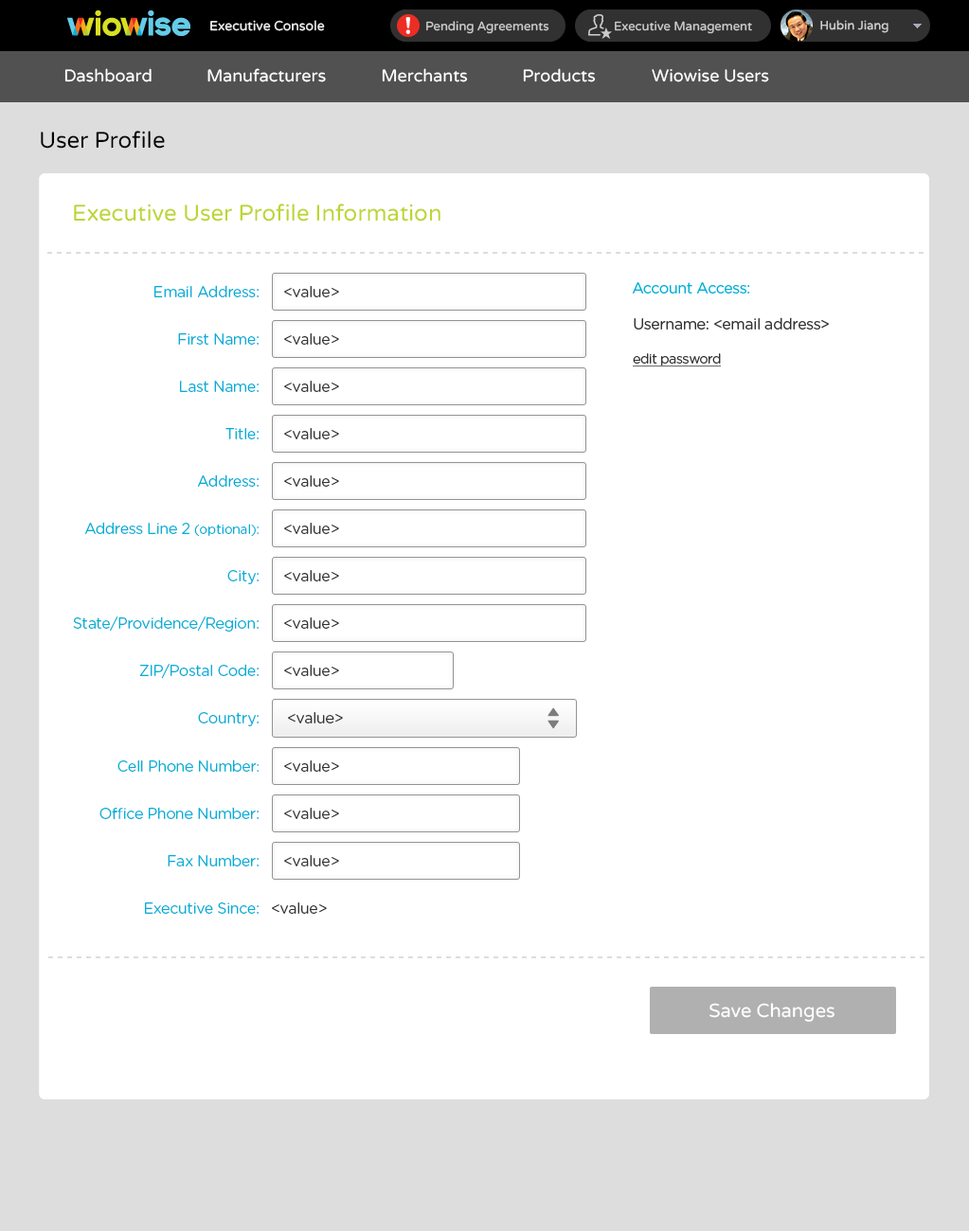
<style>
.page{position:relative;width:969px;height:1231px;background:#ffffff}
.page>*{position:absolute;margin:0}
.t1{font:13.3px "VarelaRound-Regular";color:#eeeeee}
.t2{font:12.3px "VarelaRound-Regular";color:#cccccc}
.t3{font:17px "VarelaRound-Regular";color:#ffffff}
.t4{font:22.7px "VarelaRound-Regular";color:#000000}
.t5{font:22.7px "VarelaRound-Regular";color:#bcd631}
.t6{font:15.2px "GothamRounded-Book";letter-spacing:-0.025em;color:#00afd8}
.t7{font:15.2px "GothamRounded-Book";letter-spacing:-0.025em;color:#333333}
.t8{font:13.3px "GothamRounded-Book";letter-spacing:-0.025em;color:#333333;text-decoration:underline}
.t9{font:13.3px "GothamRounded-Book";letter-spacing:-0.025em;color:#00afd8}
.t10{font:18.9px "VarelaRound-Regular";color:#ffffff}
</style>
<div class="page">
<p class="t1" style="left:210px;top:20px;width:115px;height:11px">Executive Console</p>
<p class="t2" style="left:426px;top:21px;width:123px;height:13px">Pending Agreements</p>
<p class="t2" style="left:615px;top:21px;width:137px;height:13px">Executive Management</p>
<p class="t2" style="left:820px;top:20px;width:68px;height:13px">Hubin Jiang</p>
<p class="t3" style="left:64px;top:68px;width:88px;height:14px">Dashboard</p>
<p class="t3" style="left:207px;top:68px;width:119px;height:14px">Manufacturers</p>
<p class="t3" style="left:382px;top:68px;width:86px;height:14px">Merchants</p>
<p class="t3" style="left:523px;top:68px;width:73px;height:14px">Products</p>
<p class="t3" style="left:651px;top:69px;width:118px;height:13px">Wiowise Users</p>
<p class="t4" style="left:41px;top:131px;width:124px;height:18px">User Profile</p>
<p class="t5" style="left:74px;top:204px;width:366px;height:18px">Executive User Profile Information</p>
<p class="t6" style="left:154px;top:285px;width:105px;height:12px">Email Address:</p>
<p class="t7" style="left:284px;top:286px;width:55px;height:11px">&lt;value&gt;</p>
<p class="t6" style="left:633px;top:282px;width:116px;height:12px">Account Access:</p>
<p class="t7" style="left:633px;top:317px;width:196px;height:13px">Username: &lt;email address&gt;</p>
<p class="t6" style="left:178px;top:333px;width:81px;height:12px">First Name:</p>
<p class="t7" style="left:284px;top:333px;width:55px;height:12px">&lt;value&gt;</p>
<p class="t8" style="left:633px;top:353px;width:89px;height:14px">edit password</p>
<p class="t6" style="left:180px;top:381px;width:79px;height:11px">Last Name:</p>
<p class="t7" style="left:284px;top:381px;width:55px;height:11px">&lt;value&gt;</p>
<p class="t6" style="left:225px;top:428px;width:34px;height:11px">Title:</p>
<p class="t7" style="left:284px;top:428px;width:55px;height:11px">&lt;value&gt;</p>
<p class="t6" style="left:197px;top:474px;width:62px;height:13px">Address:</p>
<p class="t7" style="left:284px;top:475px;width:55px;height:12px">&lt;value&gt;</p>
<p class="t6" style="left:84px;top:522px;width:175px;height:15px">Address Line 2 <span class="t9">(optional):</span></p>
<p class="t7" style="left:284px;top:523px;width:55px;height:11px">&lt;value&gt;</p>
<p class="t6" style="left:227px;top:570px;width:32px;height:14px">City:</p>
<p class="t7" style="left:284px;top:570px;width:55px;height:11px">&lt;value&gt;</p>
<p class="t6" style="left:73px;top:616px;width:186px;height:16px">State/Providence/Region:</p>
<p class="t7" style="left:284px;top:617px;width:55px;height:12px">&lt;value&gt;</p>
<p class="t6" style="left:139px;top:664px;width:120px;height:15px">ZIP/Postal Code:</p>
<p class="t7" style="left:284px;top:665px;width:55px;height:11px">&lt;value&gt;</p>
<p class="t6" style="left:198px;top:712px;width:61px;height:14px">Country:</p>
<p class="t7" style="left:288px;top:712px;width:55px;height:11px">&lt;value&gt;</p>
<p class="t6" style="left:117px;top:759px;width:142px;height:13px">Cell Phone Number<span class="t9">:</span></p>
<p class="t7" style="left:284px;top:760px;width:55px;height:12px">&lt;value&gt;</p>
<p class="t6" style="left:99px;top:807px;width:160px;height:13px">Office Phone Number:</p>
<p class="t7" style="left:284px;top:808px;width:55px;height:11px">&lt;value&gt;</p>
<p class="t6" style="left:168px;top:854px;width:91px;height:12px">Fax Number:</p>
<p class="t7" style="left:284px;top:855px;width:55px;height:11px">&lt;value&gt;</p>
<p class="t6" style="left:145px;top:902px;width:114px;height:12px">Executive Since:</p>
<p class="t7" style="left:272px;top:902px;width:55px;height:12px">&lt;value&gt;</p>
<p class="t10" style="left:709px;top:1003px;width:125px;height:19px">Save Changes</p>
</div>
